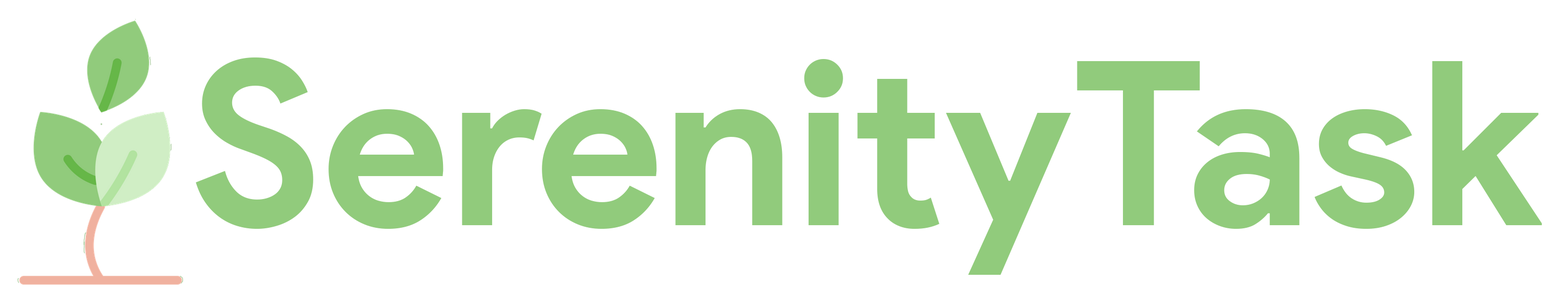
<style>
.page{position:relative;width:1568px;height:303px;background:#ffffff}
.page>*{position:absolute;margin:0}
.t1{font:228.8px "ProductSans-Bold";color:#91cb7c}
</style>
<div class="page">
<p class="t1" style="left:196px;top:58px;width:1346px;height:217px">SerenityTask</p>
</div>
